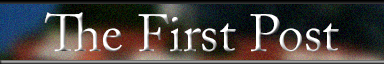
<style>
.page{position:relative;width:384px;height:64px}
.page>*{position:absolute;margin:0}
.t1{font:52px "ACaslonPro-Regular"}
</style>
<div class="page">
<p class="t1" style="left:44px;top:12px;width:295px;height:40px">The First Post</p>
</div>
